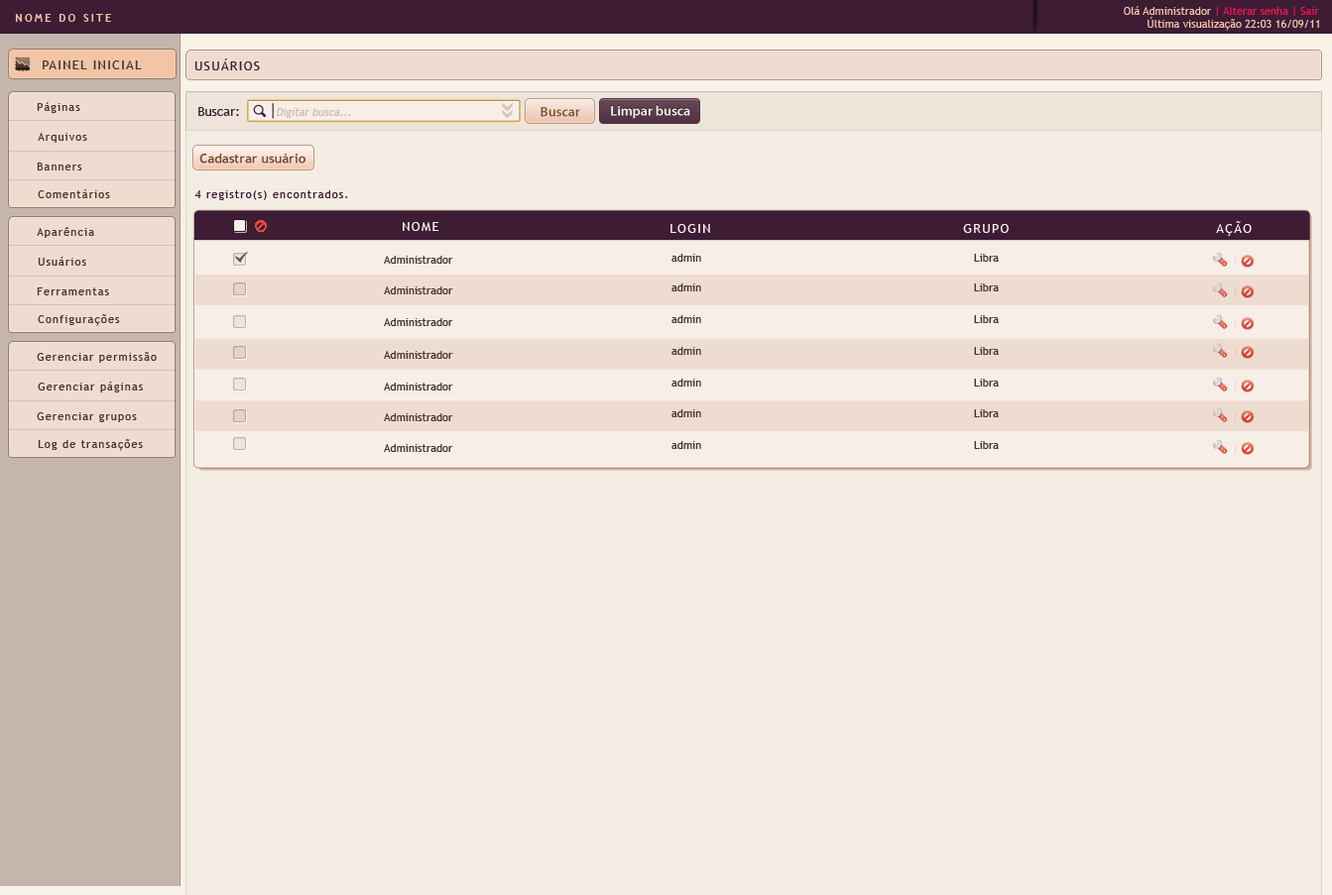
<style>
.page{position:relative;width:1332px;height:895px;background:#f4ede3}
.page>*{position:absolute;margin:0}
.t1{font:10.9px "TrebuchetMS";color:#ed1651}
.t2{font:10.9px "TrebuchetMS";color:#f3c5a8}
.t3{font:10.9px "TrebuchetMS-Bold";letter-spacing:0.2em;color:#f3c5a8;text-transform:uppercase}
.t4{font:12.9px "TrebuchetMS";letter-spacing:0.1em;color:#43342b;text-transform:uppercase}
.t5{font:12.9px "TrebuchetMS";letter-spacing:0.1em;color:#3e1c34;text-transform:uppercase}
.t6{font:10.9px "TrebuchetMS";letter-spacing:0.1em;color:#43342b}
.t7{font:12.9px "TrebuchetMS";color:#3e1c34}
.t8{font:10.9px "TrebuchetMS";color:#d2b9aa;font-style:italic}
.t9{font:13.9px "MyriadPro-Semibold";color:#7a4427}
.t10{font:13.9px "MyriadPro-Semibold";color:#ffffff}
.t11{font:12.9px "TrebuchetMS-Bold";color:#7a4427}
.t12{font:10.9px "TrebuchetMS";letter-spacing:0.1em;color:#3e1c34}
.t13{font:12.9px "TrebuchetMS";letter-spacing:0.1em;color:#fff6f0;text-transform:uppercase}
.t14{font:10.9px "TrebuchetMS";color:#43342b}
</style>
<div class="page">
<p class="t1" style="left:1123px;top:6px;width:196px;height:10px"><span class="t2">Olá Administrador </span>| Alterar senha | Sair</p>
<p class="t3" style="left:15px;top:14px;width:96px;height:8px">Nome do site</p>
<p class="t2" style="left:1147px;top:17px;width:172px;height:14px">Última visualização 22:03 16/09/11</p>
<p class="t4" style="left:43px;top:60px;width:99px;height:9px">Painel Inicial</p>
<p class="t5" style="left:194px;top:59px;width:66px;height:11px">USUÁRIOS</p>
<p class="t6" style="left:37px;top:102px;width:43px;height:11px">Páginas</p>
<p class="t7" style="left:198px;top:107px;width:41px;height:9px">Buscar:</p>
<p class="t8" style="left:277px;top:108px;width:74px;height:10px">Digitar busca...</p>
<p class="t9" style="left:540px;top:107px;width:40px;height:10px">Buscar</p>
<p class="t10" style="left:611px;top:105px;width:79px;height:14px">Limpar busca</p>
<p class="t6" style="left:38px;top:133px;width:49px;height:10px">Arquivos</p>
<p class="t11" style="left:199px;top:153px;width:106px;height:11px">Cadastrar usuário</p>
<p class="t6" style="left:37px;top:163px;width:45px;height:8px">Banners</p>
<p class="t6" style="left:38px;top:189px;width:72px;height:9px">Comentários</p>
<p class="t12" style="left:194px;top:190px;width:153px;height:10px">4 registro(s) encontrados.</p>
<p class="t13" style="left:1216px;top:221px;width:35px;height:15px">aÇÃO</p>
<p class="t6" style="left:37px;top:227px;width:57px;height:11px">Aparência</p>
<p class="t13" style="left:403px;top:222px;width:36px;height:9px">NOME</p>
<p class="t13" style="left:670px;top:224px;width:40px;height:9px">LOGIN</p>
<p class="t13" style="left:963px;top:224px;width:45px;height:9px">GRUPO</p>
<p class="t6" style="left:38px;top:257px;width:48px;height:9px">Usuários</p>
<p class="t14" style="left:384px;top:256px;width:69px;height:8px">Administrador</p>
<p class="t14" style="left:671px;top:254px;width:30px;height:8px">admin</p>
<p class="t14" style="left:974px;top:254px;width:25px;height:8px">Libra</p>
<p class="t6" style="left:37px;top:288px;width:72px;height:7px">Ferramentas</p>
<p class="t14" style="left:384px;top:287px;width:69px;height:8px">Administrador</p>
<p class="t14" style="left:671px;top:284px;width:30px;height:8px">admin</p>
<p class="t14" style="left:974px;top:284px;width:25px;height:8px">Libra</p>
<p class="t6" style="left:38px;top:314px;width:82px;height:12px">Configurações</p>
<p class="t14" style="left:671px;top:315px;width:30px;height:8px">admin</p>
<p class="t14" style="left:974px;top:315px;width:25px;height:8px">Libra</p>
<p class="t14" style="left:384px;top:318px;width:69px;height:8px">Administrador</p>
<p class="t6" style="left:37px;top:352px;width:120px;height:11px">Gerenciar permissão</p>
<p class="t14" style="left:384px;top:351px;width:69px;height:8px">Administrador</p>
<p class="t14" style="left:671px;top:347px;width:30px;height:8px">admin</p>
<p class="t14" style="left:974px;top:347px;width:25px;height:8px">Libra</p>
<p class="t6" style="left:38px;top:382px;width:105px;height:11px">Gerenciar páginas</p>
<p class="t14" style="left:384px;top:383px;width:69px;height:8px">Administrador</p>
<p class="t14" style="left:671px;top:379px;width:30px;height:8px">admin</p>
<p class="t14" style="left:974px;top:379px;width:25px;height:8px">Libra</p>
<p class="t6" style="left:37px;top:413px;width:100px;height:9px">Gerenciar grupos</p>
<p class="t14" style="left:384px;top:413px;width:69px;height:8px">Administrador</p>
<p class="t14" style="left:671px;top:410px;width:30px;height:7px">admin</p>
<p class="t14" style="left:974px;top:410px;width:25px;height:7px">Libra</p>
<p class="t6" style="left:38px;top:439px;width:105px;height:12px">Log de transações</p>
<p class="t14" style="left:384px;top:444px;width:69px;height:8px">Administrador</p>
<p class="t14" style="left:671px;top:441px;width:30px;height:8px">admin</p>
<p class="t14" style="left:974px;top:441px;width:25px;height:8px">Libra</p>
</div>
